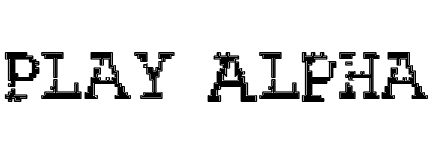
<style>
.page{position:relative;width:438px;height:150px;background:#ffffff}
.page>*{position:absolute;margin:0}
.t1{font:60px "RubberBiscuitBevelOutline";color:#000000}
</style>
<div class="page">
<p class="t1" style="left:4px;top:52px;width:424px;height:50px">Play Alpha</p>
</div>
